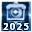
<style>
.page{position:relative;width:32px;height:32px}
.page>*{position:absolute;margin:0}
.t1{font:9.2px "AdobeHeitiStd-Regular";letter-spacing:0.18em;color:#ffffff}
</style>
<div class="page">
<p class="t1" style="left:3px;top:23px;width:26px;height:7px">2025</p>
</div>
